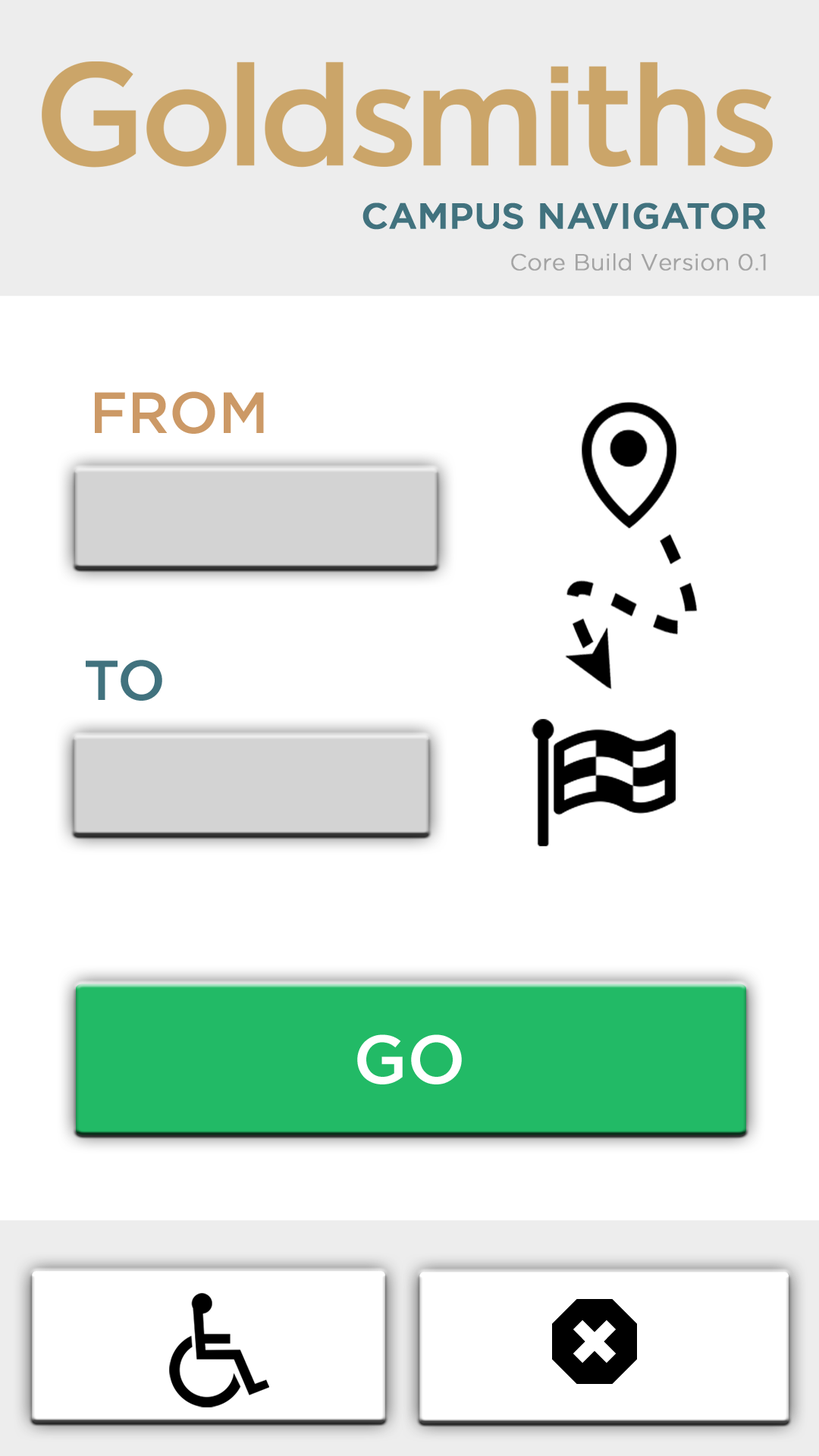
<style>
.page{position:relative;width:819px;height:1456px;background:#ffffff}
.page>*{position:absolute;margin:0}
.t1{font:35.6px "Gotham-Medium";color:#41727e;font-weight:bold}
.t2{font:22.7px "Gotham-Light";color:#a4a4a4;font-weight:bold}
.t3{font:57.9px "Gotham-Medium";color:#cc9966}
.t4{font:56.1px "Gotham-Medium";color:#41727e}
.t5{font:68.6px "Gotham-Medium";color:#ffffff}
</style>
<div class="page">
<p class="t1" style="left:362px;top:202px;width:404px;height:28px">CAMPUS NAVIGATOR</p>
<p class="t2" style="left:511px;top:253px;width:255px;height:18px">Core Build Version 0.1</p>
<p class="t3" style="left:95px;top:391px;width:169px;height:43px">FROM</p>
<p class="t4" style="left:86px;top:660px;width:76px;height:41px">TO</p>
<p class="t5" style="left:357px;top:1034px;width:105px;height:50px">GO</p>
</div>
